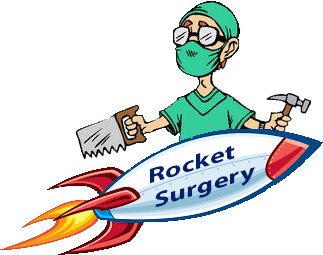
<style>
.page{position:relative;width:323px;height:255px;background:#ffffff}
.page>*{position:absolute;margin:0}
.t1{font:21.3px "MyriadPro-Bold";color:#002269;scale:1.41 1}
</style>
<div class="page">
<p class="t1" style="left:150px;top:145px;width:105px;height:62px;rotate:-17deg">Rocket<br> Surgery</p>
</div>
